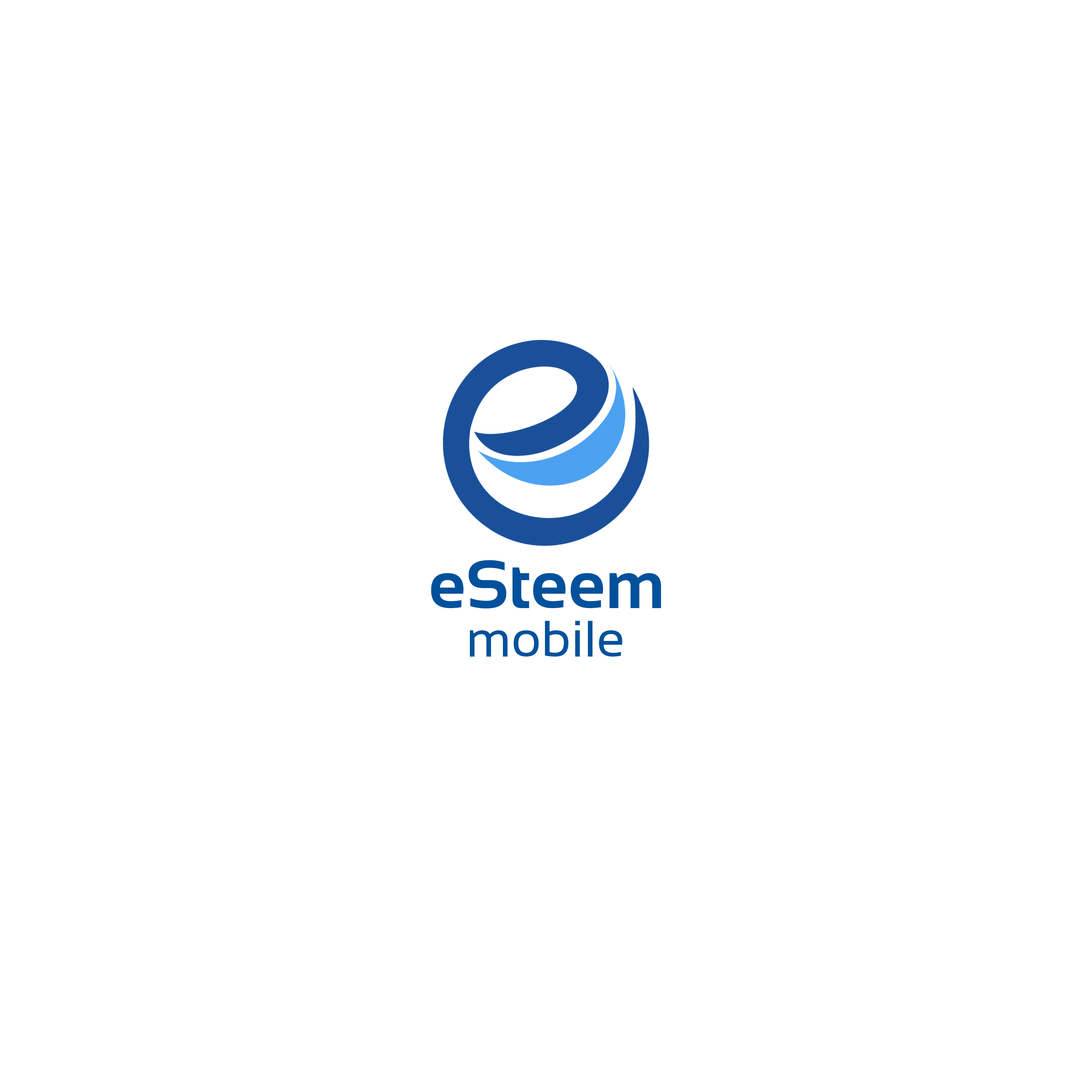
<style>
.page{position:relative;width:1092px;height:1092px;background:#ffffff}
.page>*{position:absolute;margin:0}
.t1{font:68.2px "Sansation-Bold";color:#00519c}
.t2{font:51.2px "Sansation-Regular";color:#00519c}
</style>
<div class="page">
<p class="t1" style="left:431px;top:560px;width:230px;height:48px">eSteem</p>
<p class="t2" style="left:470px;top:621px;width:152px;height:36px">mobile</p>
</div>
